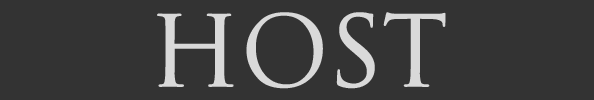
<style>
.page{position:relative;width:594px;height:100px;background:#333333}
.page>*{position:absolute;margin:0}
.t1{font:95.5px "SpaceandAstronomy";color:#d9d9d9}
</style>
<div class="page">
<p class="t1" style="left:157px;top:12px;width:289px;height:77px">Host</p>
</div>
